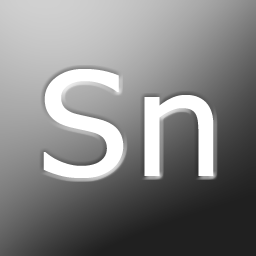
<style>
.page{position:relative;width:256px;height:256px}
.page>*{position:absolute;margin:0}
.t1{font:144px "Tahoma";color:#ffffff;scale:1.11 1}
</style>
<div class="page">
<p class="t1" style="left:43px;top:69px;width:171px;height:109px">Sn</p>
</div>
